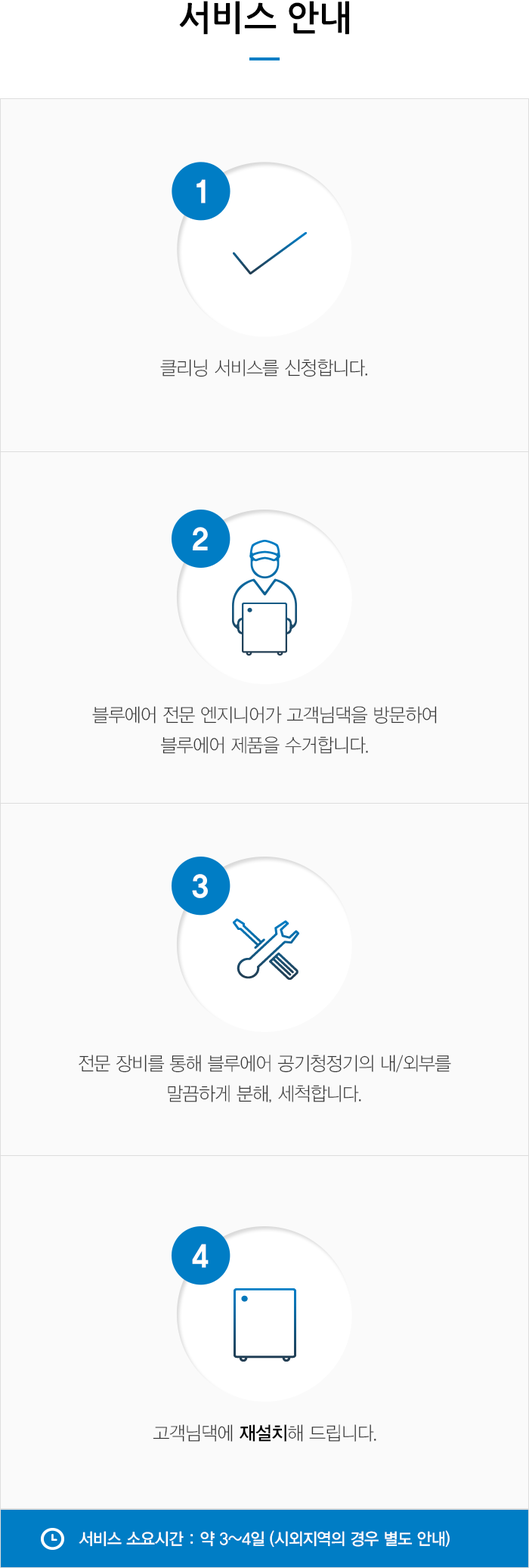
<style>
.page{position:relative;width:529px;height:1568px;background:#fafafa}
.page>*{position:absolute;margin:0}
.t1{font:34.8px "NanumGothicBold";color:#000000}
.t2{font:30.2px "YDVYGO36";color:#ffffff;scale:0.95 1}
.t3{font:18.9px "YDVYGO31";letter-spacing:-0.025em;color:#333333;scale:0.95 1}
.t4{font:18.9px/30.2px "YDVYGO31";letter-spacing:-0.025em;color:#333333;scale:0.95 1}
.t5{font:18.9px "YDVYGO33";letter-spacing:-0.025em;color:#000000;scale:0.95 1}
.t6{font:16.6px "YDVYGO33";letter-spacing:-0.025em;color:#ffffff;scale:0.95 1}
</style>
<div class="page">
<p class="t1" style="left:179px;top:1px;width:170px;height:34px">서비스 안내</p>
<p class="t2" style="left:197px;top:179px;width:9px;height:24px">1</p>
<p class="t3" style="left:160px;top:359px;width:207px;height:18px">클리닝 서비스를 신청합니다.</p>
<p class="t2" style="left:193px;top:527px;width:15px;height:23px">2</p>
<p class="t4" style="left:92px;top:706px;width:345px;height:48px;text-align:center">블루에어 전문 엔지니어가 고객님댁을 방문하여<br>블루에어 제품을 수거합니다.</p>
<p class="t2" style="left:192px;top:874px;width:16px;height:24px">3</p>
<p class="t4" style="left:79px;top:1055px;width:372px;height:48px;text-align:center">전문 장비를 통해 블루에어 공기청정기의 내/외부를<br>말끔하게 분해, 세척합니다.</p>
<p class="t2" style="left:192px;top:1244px;width:17px;height:24px">4</p>
<p class="t3" style="left:153px;top:1424px;width:224px;height:18px">고객님댁에 <span class="t5">재설치</span>해 드립니다.</p>
<p class="t6" style="left:79px;top:1530px;width:371px;height:18px">서비스 소요시간 : 약 3~4일 (시외지역의 경우 별도 안내)</p>
</div>
